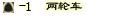
<style>
.page{position:relative;width:130px;height:18px;background:#ffffff}
.page>*{position:absolute;margin:0}
.t1{font:12.8px "LiSu";letter-spacing:-0.075em;color:#161616}
</style>
<div class="page">
<p class="t1" style="left:46px;top:1px;width:37px;height:10px">两轮车</p>
</div>
